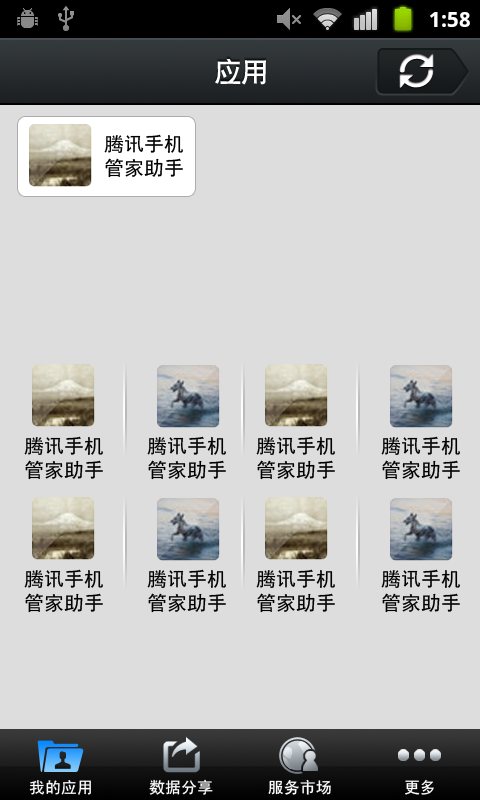
<style>
.page{position:relative;width:480px;height:800px;background:#dddddd}
.page>*{position:absolute;margin:0}
.t1{font:27px "CTCuHeiSJ";color:#ffffff}
.t2{font:20px/24px "SimHei";color:#000000}
.t3{font:16px "SimHei";color:#ffffff}
</style>
<div class="page">
<p class="t1" style="left:215px;top:58px;width:51px;height:27px">应用</p>
<p class="t2" style="left:104px;top:134px;width:79px;height:44px;text-align:center">腾讯手机<br>管家助手</p>
<p class="t2" style="left:24px;top:436px;width:79px;height:44px;text-align:center">腾讯手机<br>管家助手</p>
<p class="t2" style="left:147px;top:436px;width:79px;height:44px;text-align:center">腾讯手机<br>管家助手</p>
<p class="t2" style="left:256px;top:436px;width:79px;height:44px;text-align:center">腾讯手机<br>管家助手</p>
<p class="t2" style="left:381px;top:436px;width:79px;height:44px;text-align:center">腾讯手机<br>管家助手</p>
<p class="t2" style="left:24px;top:569px;width:79px;height:44px;text-align:center">腾讯手机<br>管家助手</p>
<p class="t2" style="left:147px;top:569px;width:79px;height:44px;text-align:center">腾讯手机<br>管家助手</p>
<p class="t2" style="left:256px;top:569px;width:79px;height:44px;text-align:center">腾讯手机<br>管家助手</p>
<p class="t2" style="left:381px;top:569px;width:79px;height:44px;text-align:center">腾讯手机<br>管家助手</p>
<p class="t3" style="left:29px;top:780px;width:62px;height:15px">我的应用</p>
<p class="t3" style="left:149px;top:779px;width:64px;height:16px">数据分享</p>
<p class="t3" style="left:268px;top:779px;width:63px;height:16px">服务市场</p>
<p class="t3" style="left:405px;top:779px;width:29px;height:16px">更多</p>
</div>
